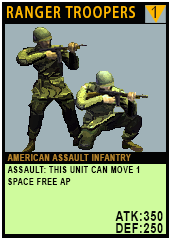
<style>
.page{position:relative;width:170px;height:241px;background:#a0b2b8}
.page>*{position:absolute;margin:0}
.t1{font:15.1px "AdobeHeitiStd-Regular";letter-spacing:0.08em;color:#ffb800;text-transform:uppercase;scale:0.86 1}
.t2{font:17.4px "ArialMT";letter-spacing:0.08em;text-transform:uppercase;scale:0.86 1}
.t3{font:9.3px/12px "Arial-BoldMT";letter-spacing:0.08em;color:#020100;text-transform:uppercase;scale:0.76 1}
.t4{font:9.3px/20.2px "Arial-BoldMT";letter-spacing:0.08em;color:#b4832c;text-transform:uppercase;scale:0.76 1}
.t5{font:13.9px/12px "Arial-BoldMT";letter-spacing:0.08em;color:#050606;text-transform:uppercase;scale:0.76 1}
</style>
<div class="page">
<p class="t1" style="left:7px;top:6px;width:128px;height:12px">Ranger troopers</p>
<p class="t2" style="left:151px;top:6px;width:5px;height:12px">1</p>
<p class="t3" style="left:7px;top:154px;width:156px;height:79px"><span class="t4">American Assault infantry<br></span>Assault: This unit can move 1 space free ap<br><br><br><span class="t5">atk:350<br>def:250</span></p>
</div>
